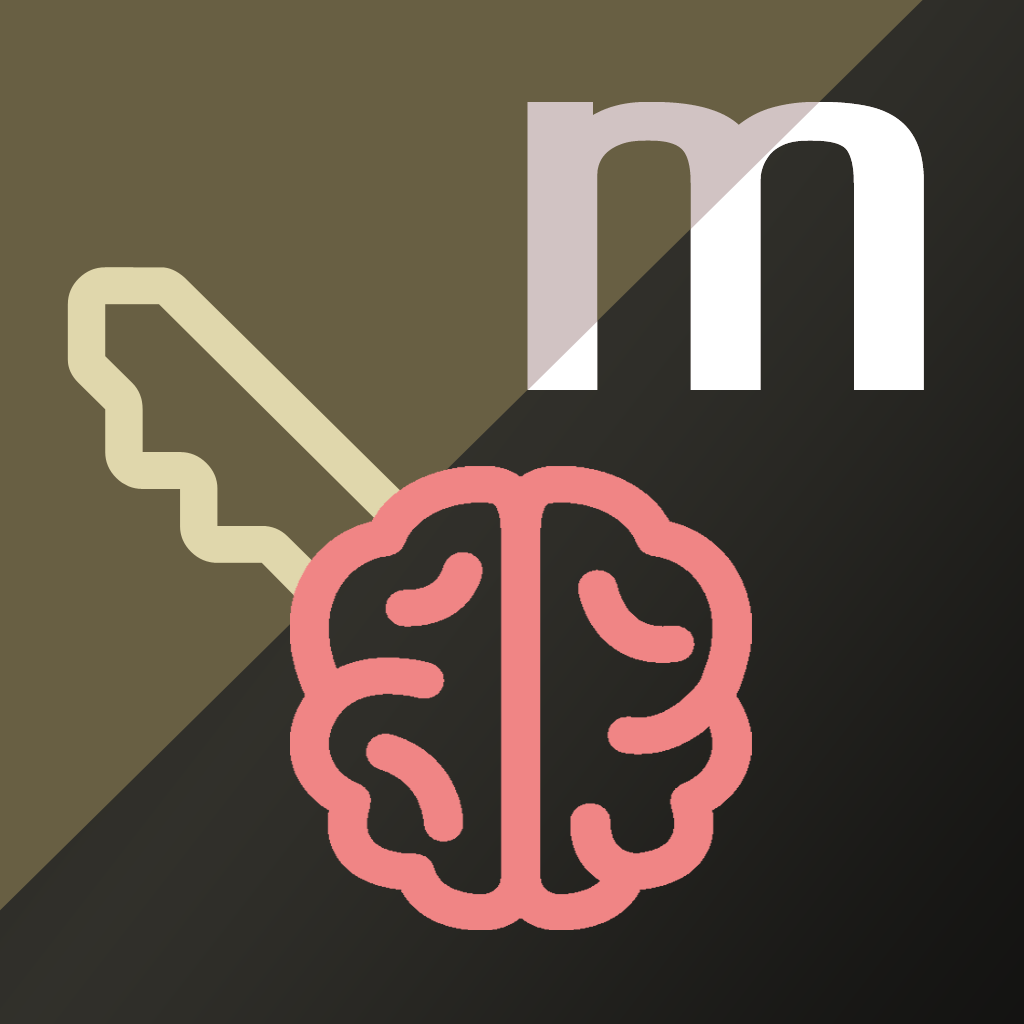
<style>
.page{position:relative;width:1024px;height:1024px;background:#685f43}
.page>*{position:absolute;margin:0}
.t1{font:576px "Share-TechMono";letter-spacing:0.09em;scale:1.52 1}
</style>
<div class="page">
<p class="t1" style="left:527px;top:102px;width:397px;height:288px">m</p>
<p class="t1" style="left:527px;top:102px;width:397px;height:288px">m</p>
</div>
